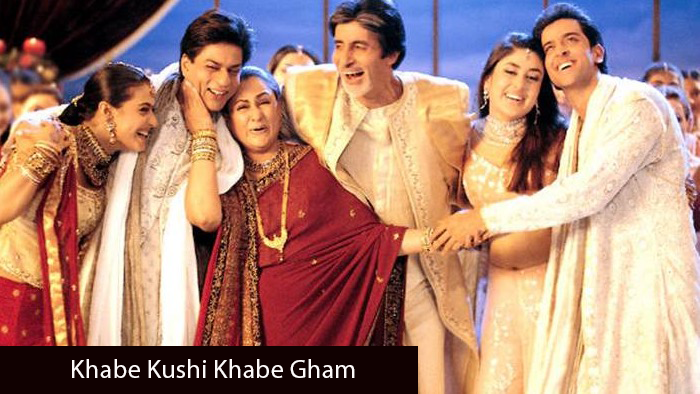
<style>
.page{position:relative;width:700px;height:394px}
.page>*{position:absolute;margin:0}
.t1{font:26.7px "MyriadPro-Regular";color:#fdf9f9}
</style>
<div class="page">
<p class="t1" style="left:72px;top:359px;width:283px;height:19px">Khabe Kushi Khabe Gham</p>
</div>
